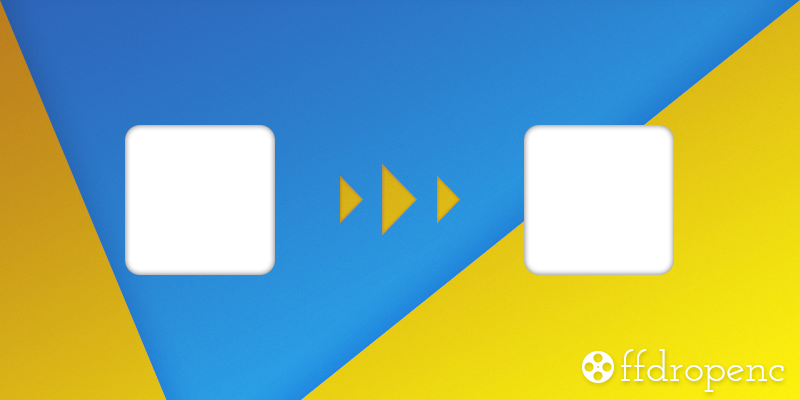
<style>
.page{position:relative;width:800px;height:400px}
.page>*{position:absolute;margin:0}
.t1{font:42.5px "JosefinSlab";color:#ffffff}
</style>
<div class="page">
<p class="t1" style="left:621px;top:349px;width:163px;height:43px">ffdropenc</p>
</div>
